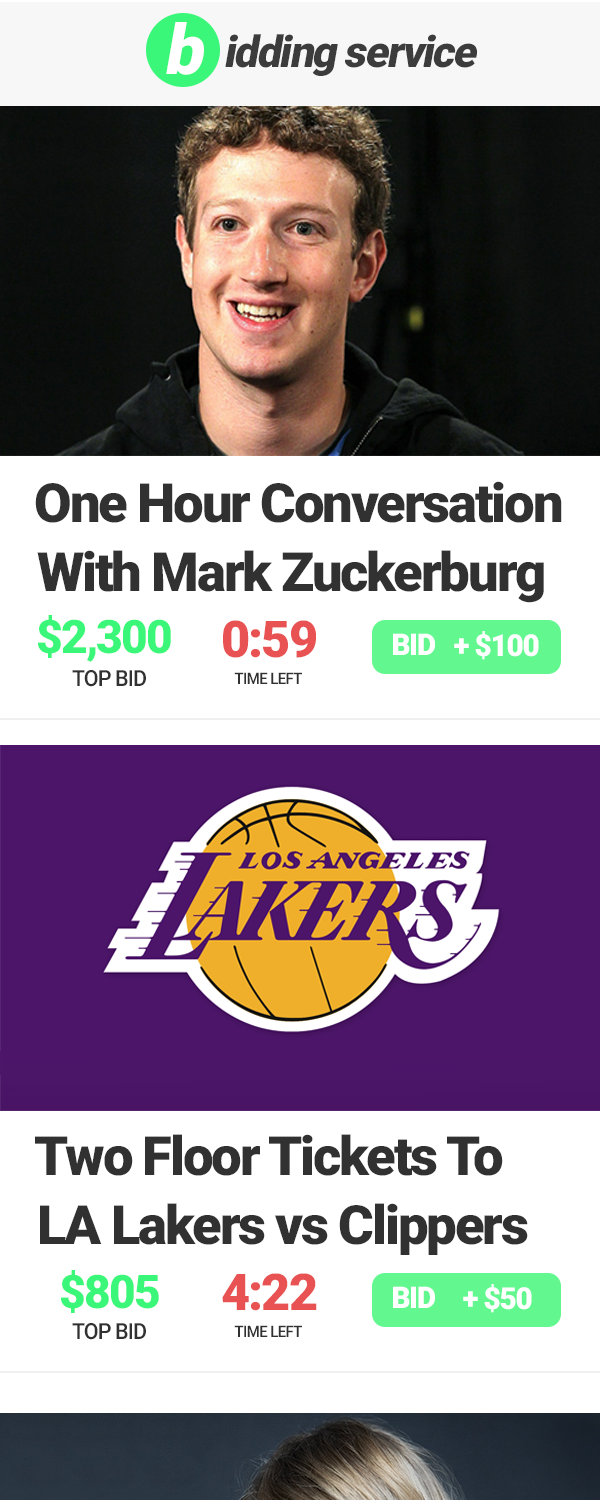
<style>
.page{position:relative;width:600px;height:1500px;background:#ffffff}
.page>*{position:absolute;margin:0}
.t1{font:69.3px "Roboto-Black";letter-spacing:-0.06em;color:#ffffff;font-style:italic}
.t2{font:43.5px "Roboto-Black";letter-spacing:-0.04em;color:#3c3c3c;font-style:italic}
.t3{font:54.1px "Roboto-Black";letter-spacing:-0.04em;color:#313131}
.t4{font:46.2px "Roboto-Black";letter-spacing:-0.04em;color:#3bf779}
.t5{font:50.7px "Roboto-Black";letter-spacing:-0.04em;color:#e95252}
.t6{font:30px "Roboto-Black";letter-spacing:-0.04em;color:#ffffff}
.t7{font:30.2px "Roboto-Black";letter-spacing:-0.04em;color:#ffffff}
.t8{font:22.2px "Roboto-Medium";letter-spacing:-0.04em;color:#313131;scale:0.96 1}
.t9{font:15.7px "Roboto-Medium";letter-spacing:-0.04em;color:#313131;scale:0.96 1}
</style>
<div class="page">
<p class="t1" style="left:166px;top:22px;width:38px;height:53px">b</p>
<p class="t2" style="left:225px;top:34px;width:252px;height:42px">idding service</p>
<p class="t3" style="left:35px;top:481px;width:527px;height:42px">One Hour Conversation</p>
<p class="t3" style="left:37px;top:550px;width:507px;height:53px">With Mark Zuckerburg</p>
<p class="t4" style="left:38px;top:615px;width:133px;height:47px">$2,300</p>
<p class="t5" style="left:223px;top:620px;width:93px;height:38px">0:59</p>
<p class="t6" style="left:393px;top:633px;width:42px;height:22px">BID</p>
<p class="t7" style="left:454px;top:631px;width:85px;height:29px">+ $100</p>
<p class="t8" style="left:72px;top:670px;width:74px;height:17px">TOP BID</p>
<p class="t9" style="left:234px;top:672px;width:68px;height:12px">TIME LEFT</p>
<p class="t3" style="left:35px;top:1134px;width:468px;height:42px">Two Floor Tickets To</p>
<p class="t3" style="left:40px;top:1203px;width:488px;height:52px">LA Lakers vs Clippers</p>
<p class="t4" style="left:61px;top:1270px;width:98px;height:43px">$805</p>
<p class="t5" style="left:222px;top:1273px;width:95px;height:38px">4:22</p>
<p class="t6" style="left:393px;top:1286px;width:42px;height:22px">BID</p>
<p class="t7" style="left:463px;top:1284px;width:69px;height:29px">+ $50</p>
<p class="t8" style="left:72px;top:1323px;width:74px;height:17px">TOP BID</p>
<p class="t9" style="left:234px;top:1325px;width:68px;height:12px">TIME LEFT</p>
</div>
